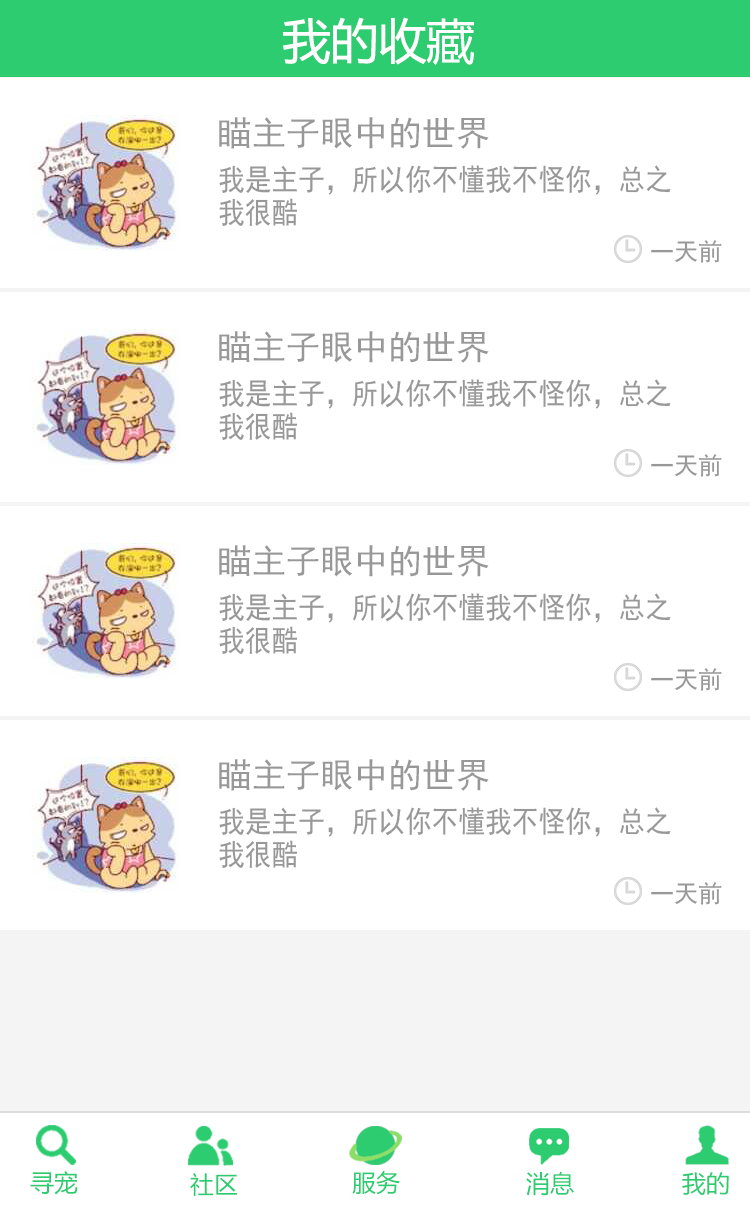
<style>
.page{position:relative;width:750px;height:1206px;background:#ffffff}
.page>*{position:absolute;margin:0}
.t1{font:48px "MicrosoftYaHei";color:#ffffff}
.t2{font:34px "SimHei";color:#989898}
.t3{font:30px/33px "SimHei";color:#989898;scale:0.89 1}
.t4{font:24px "SimHei";color:#989898}
.t5{font:24px "MicrosoftYaHei";color:#2ecc71}
.t6{font:24px "MicrosoftYaHei"}
</style>
<div class="page">
<p class="t1" style="left:283px;top:17px;width:191px;height:48px">我的收藏</p>
<p class="t2" style="left:219px;top:117px;width:270px;height:32px">瞄主子眼中的世界</p>
<p class="t3" style="left:219px;top:165px;width:452px;height:61px">我是主子，所以你不懂我不怪你，总之<br>我很酷</p>
<p class="t4" style="left:651px;top:240px;width:71px;height:23px">一天前</p>
<p class="t2" style="left:219px;top:331px;width:270px;height:32px">瞄主子眼中的世界</p>
<p class="t3" style="left:219px;top:379px;width:452px;height:61px">我是主子，所以你不懂我不怪你，总之<br>我很酷</p>
<p class="t4" style="left:651px;top:454px;width:71px;height:23px">一天前</p>
<p class="t2" style="left:219px;top:545px;width:270px;height:32px">瞄主子眼中的世界</p>
<p class="t3" style="left:219px;top:593px;width:452px;height:61px">我是主子，所以你不懂我不怪你，总之<br>我很酷</p>
<p class="t4" style="left:651px;top:668px;width:71px;height:23px">一天前</p>
<p class="t2" style="left:219px;top:759px;width:270px;height:32px">瞄主子眼中的世界</p>
<p class="t3" style="left:219px;top:807px;width:452px;height:61px">我是主子，所以你不懂我不怪你，总之<br>我很酷</p>
<p class="t4" style="left:651px;top:882px;width:71px;height:23px">一天前</p>
<p class="t5" style="left:30px;top:1171px;width:48px;height:24px">寻宠</p>
<p class="t5" style="left:190px;top:1173px;width:47px;height:23px">社区</p>
<p class="t6" style="left:352px;top:1171px;width:48px;height:25px">服务</p>
<p class="t5" style="left:352px;top:1170px;width:48px;height:25px">服务</p>
<p class="t6" style="left:525px;top:1171px;width:48px;height:25px">消息</p>
<p class="t5" style="left:526px;top:1171px;width:48px;height:25px">消息</p>
<p class="t5" style="left:682px;top:1172px;width:47px;height:23px">我的</p>
<p class="t5" style="left:682px;top:1172px;width:47px;height:23px">我的</p>
</div>
